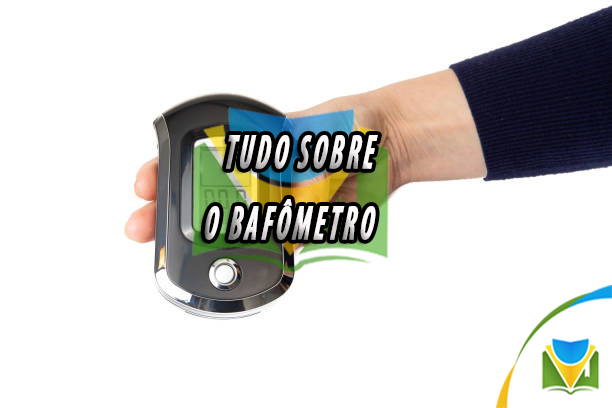
<style>
.page{position:relative;width:612px;height:408px;background:#ffffff}
.page>*{position:absolute;margin:0}
.t1{font:48.5px/35.7px "MyriadPro-BoldCondIt";letter-spacing:0.1em;color:#fdf8f8;text-transform:uppercase;font-weight:bold;font-style:italic;scale:0.56 1}
</style>
<div class="page">
<p class="t1" style="left:204px;top:135px;width:174px;height:105px;text-align:center">tudo sobre<br>        <br>                    o Bafômetro</p>
</div>
